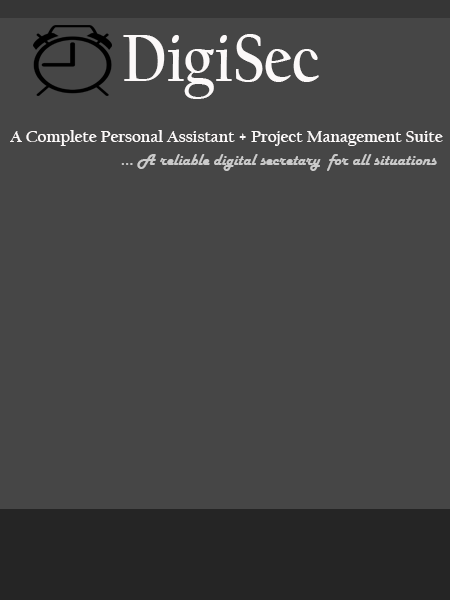
<style>
.page{position:relative;width:450px;height:600px;background:#464646}
.page>*{position:absolute;margin:0}
.t1{font:69.9px "CalifornianFB-Bold";color:#fcf9f9;scale:0.88 1}
.t2{font:17px "CalifornianFB-Bold";color:#fcf9f9}
.t3{font:17px "HarlowSolid";color:#cacaca}
</style>
<div class="page">
<p class="t1" style="left:123px;top:34px;width:196px;height:65px">DigiSec</p>
<p class="t2" style="left:10px;top:130px;width:433px;height:16px">A Complete Personal Assistant + Project Management Suite</p>
<p class="t3" style="left:121px;top:154px;width:316px;height:17px">... A reliable digital secretary  for all situations</p>
</div>
